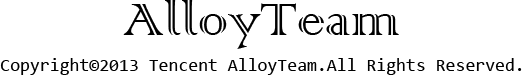
<style>
.page{position:relative;width:522px;height:75px;background:#ffffff}
.page>*{position:absolute;margin:0}
.t1{font:60px "ColonnaMT";color:#000000}
.t2{font:18px "Consolas";color:#000000}
</style>
<div class="page">
<p class="t1" style="left:123px;top:0px;width:276px;height:49px">AlloyTeam</p>
<p class="t2" style="left:0px;top:58px;width:522px;height:17px">Copyright©2013 Tencent AlloyTeam.All Rights Reserved.</p>
</div>
